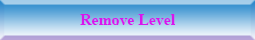
<style>
.page{position:relative;width:255px;height:40px}
.page>*{position:absolute;margin:0}
.t1{font:15.8px "TimesNewRomanPS-BoldMT";color:#d815ed}
</style>
<div class="page">
<p class="t1" style="left:80px;top:14px;width:96px;height:11px">Remove Level</p>
</div>
